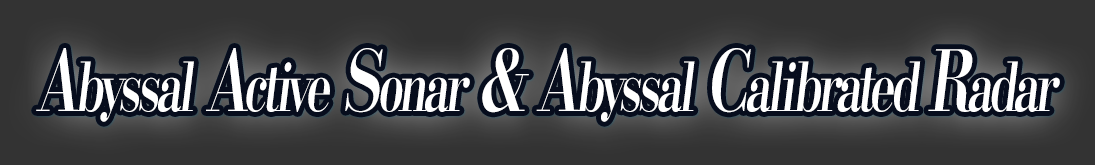
<style>
.page{position:relative;width:1095px;height:165px;background:#333333}
.page>*{position:absolute;margin:0}
.t1{font:67.2px "KochoStd-Heavy";letter-spacing:-0.08em;color:#ffffff;font-style:italic;scale:0.69 1}
.t2{font:84px "KochoStd-Heavy";letter-spacing:-0.08em;color:#ffffff;font-style:italic;scale:0.69 1}
</style>
<div class="page">
<p class="t1" style="left:36px;top:48px;width:1024px;height:74px"><span class="t2">A</span>byssal<span class="t2"> A</span>ctive<span class="t2"> S</span>onar<span class="t2"> &amp; A</span>byssal<span class="t2"> C</span>alibrated <span class="t2">R</span>adar</p>
</div>
